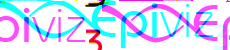
<style>
.page{position:relative;width:230px;height:50px;background:#ffffff}
.page>*{position:absolute;margin:0}
.t1{font:52.1px "BauhausITCbyBT-Medium";color:#12ffff;scale:1.05 1}
.t2{font:52.1px "BauhausITCbyBT-Light";color:#12ffff;scale:1.05 1}
.t3{font:36.2px "BauhausITCbyBT-Medium"}
</style>
<div class="page">
<p class="t1" style="left:91px;top:1px;width:123px;height:47px">Epi<span class="t2">viz</span></p>
<p class="t3" style="left:213px;top:24px;width:17px;height:26px">3</p>
</div>
